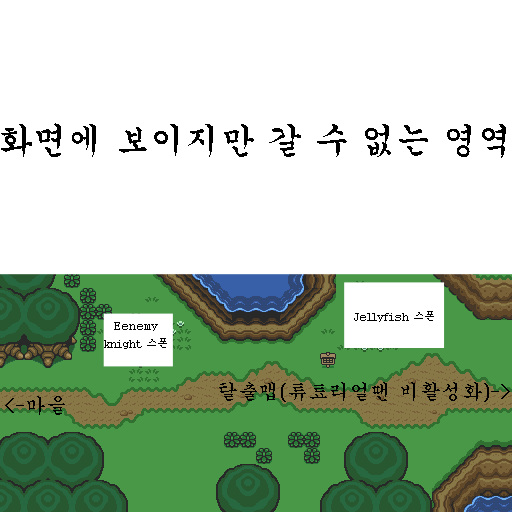
<style>
.page{position:relative;width:512px;height:512px;background:#ffffff}
.page>*{position:absolute;margin:0}
.t1{font:35.3px "Gungsuh";color:#000000}
.t2{font:10.6px "Gungsuh";color:#000000}
.t3{font:21.2px "Gungsuh";color:#000000}
</style>
<div class="page">
<p class="t1" style="left:1px;top:123px;width:505px;height:35px">화면에 보이지만 갈 수 없는 영역</p>
<p class="t2" style="left:354px;top:311px;width:80px;height:11px">Jellyfish 스폰</p>
<p class="t2" style="left:104px;top:322px;width:63px;height:27px;text-align:center">Eenemy<br>knight 스폰</p>
<p class="t3" style="left:219px;top:382px;width:291px;height:20px">탈출맵(튜툐리얼땐 비활성화)-&gt;</p>
<p class="t3" style="left:5px;top:396px;width:60px;height:19px"><span class="t1">   </span>&lt;-마을</p>
</div>
